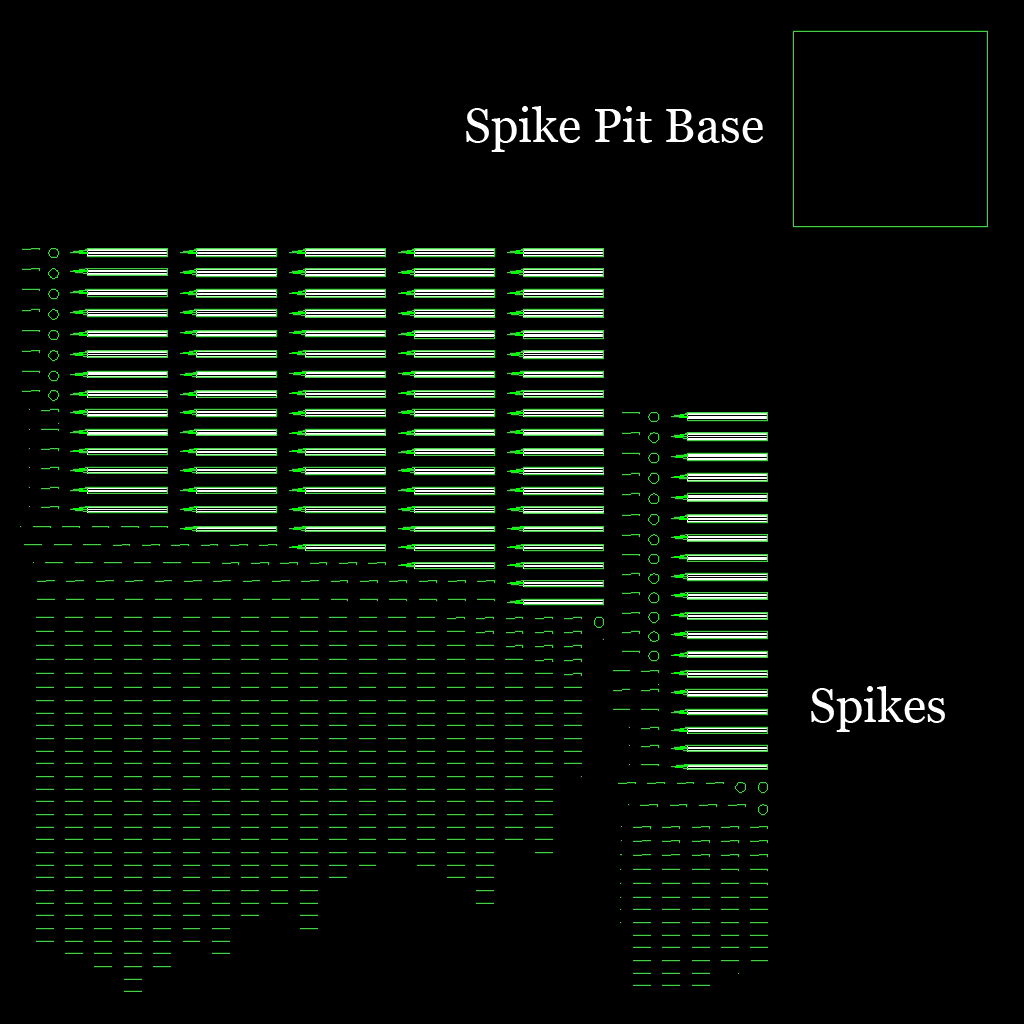
<style>
.page{position:relative;width:1024px;height:1024px;background:#000000}
.page>*{position:absolute;margin:0}
.t1{font:48px "Georgia";color:#ffffff}
</style>
<div class="page">
<p class="t1" style="left:466px;top:106px;width:298px;height:46px">Spike Pit Base</p>
<p class="t1" style="left:811px;top:686px;width:134px;height:46px">Spikes</p>
</div>
